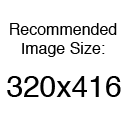
<style>
.page{position:relative;width:128px;height:128px;background:#ffffff}
.page>*{position:absolute;margin:0}
.t1{font:16px "Helvetica";color:#000000}
.t2{font:30px "Helvetica";color:#000000}
</style>
<div class="page">
<p class="t1" style="left:10px;top:23px;width:107px;height:34px;text-align:center">Recommended<br>Image Size:</p>
<p class="t2" style="left:7px;top:76px;width:114px;height:21px">320x416</p>
</div>
